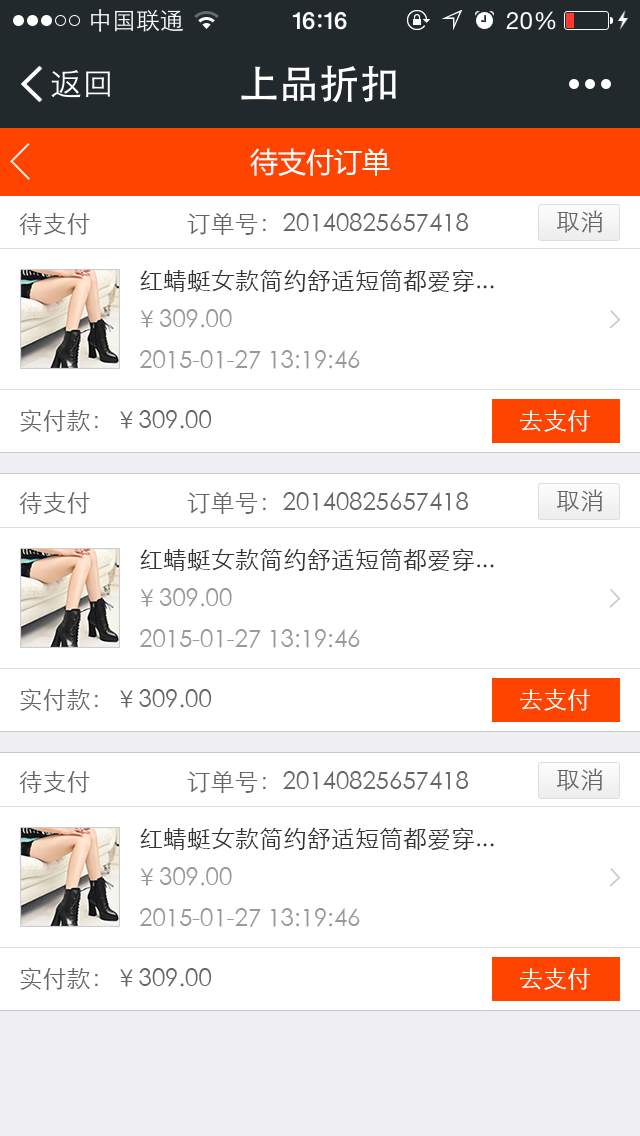
<style>
.page{position:relative;width:640px;height:1136px;background:#ffffff}
.page>*{position:absolute;margin:0}
.t1{font:28px "MicrosoftYaHei";color:#ffffff}
.t2{font:24px "STXihei";color:#666666}
.t3{font:24px "STXihei";color:#333333}
.t4{font:24px "STXihei";color:#999999}
.t5{font:24px "STXihei";color:#ffffff}
</style>
<div class="page">
<p class="t1" style="left:250px;top:148px;width:140px;height:28px">待支付订单</p>
<p class="t2" style="left:19px;top:212px;width:450px;height:23px">待支付                订单号：20140825657418</p>
<p class="t2" style="left:557px;top:210px;width:46px;height:23px">取消</p>
<p class="t3" style="left:140px;top:269px;width:354px;height:23px">红蜻蜓女款简约舒适短筒都爱穿...</p>
<p class="t4" style="left:140px;top:309px;width:92px;height:19px">￥309.00</p>
<p class="t4" style="left:139px;top:350px;width:221px;height:19px">2015-01-27 13:19:46</p>
<p class="t2" style="left:20px;top:409px;width:192px;height:23px">实付款：￥309.00</p>
<p class="t5" style="left:520px;top:409px;width:71px;height:23px">去支付</p>
<p class="t2" style="left:19px;top:491px;width:450px;height:23px">待支付                订单号：20140825657418</p>
<p class="t2" style="left:557px;top:489px;width:46px;height:23px">取消</p>
<p class="t3" style="left:140px;top:548px;width:354px;height:23px">红蜻蜓女款简约舒适短筒都爱穿...</p>
<p class="t4" style="left:140px;top:588px;width:92px;height:19px">￥309.00</p>
<p class="t4" style="left:139px;top:629px;width:221px;height:19px">2015-01-27 13:19:46</p>
<p class="t2" style="left:20px;top:688px;width:192px;height:23px">实付款：￥309.00</p>
<p class="t5" style="left:520px;top:688px;width:71px;height:23px">去支付</p>
<p class="t2" style="left:19px;top:770px;width:450px;height:23px">待支付                订单号：20140825657418</p>
<p class="t2" style="left:557px;top:768px;width:46px;height:23px">取消</p>
<p class="t3" style="left:140px;top:827px;width:354px;height:23px">红蜻蜓女款简约舒适短筒都爱穿...</p>
<p class="t4" style="left:140px;top:867px;width:92px;height:19px">￥309.00</p>
<p class="t4" style="left:139px;top:908px;width:221px;height:19px">2015-01-27 13:19:46</p>
<p class="t2" style="left:20px;top:967px;width:192px;height:23px">实付款：￥309.00</p>
<p class="t5" style="left:520px;top:967px;width:71px;height:23px">去支付</p>
</div>
